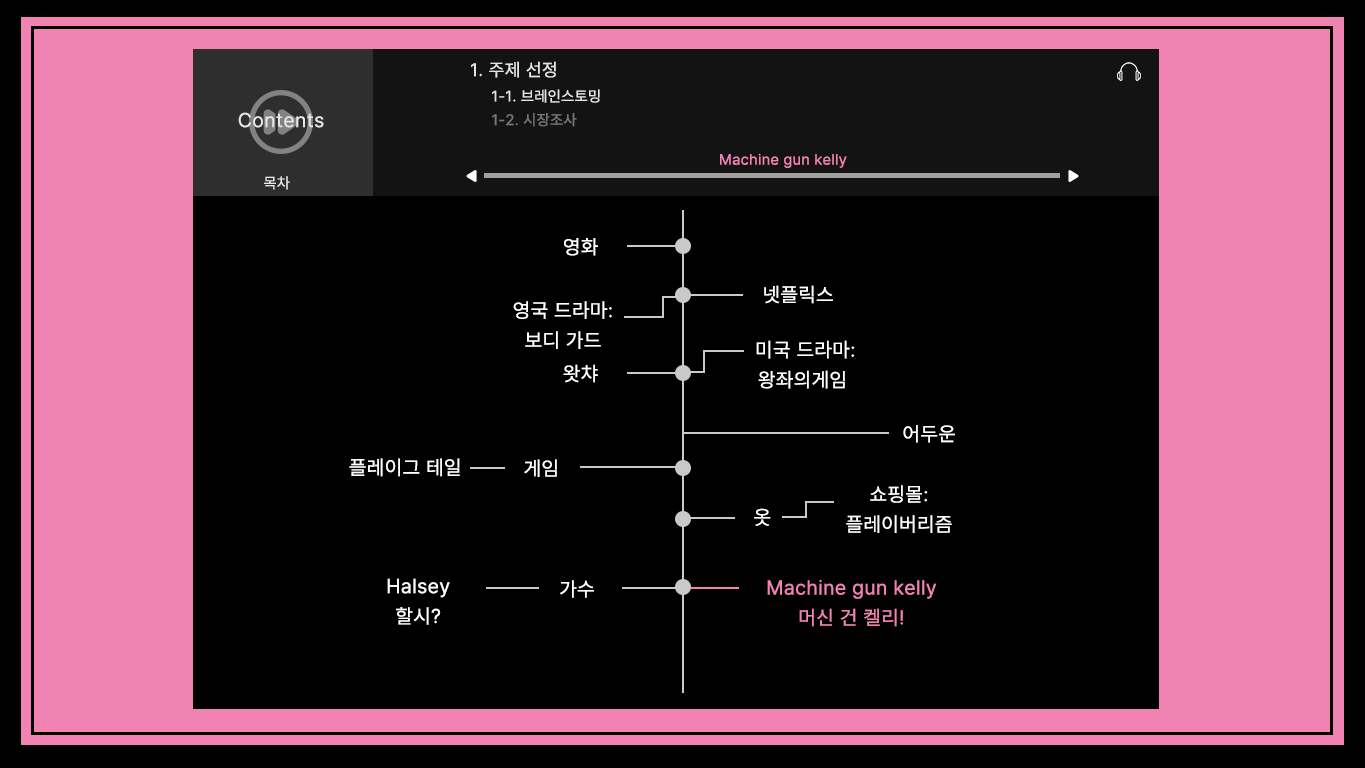
<style>
.page{position:relative;width:1365px;height:768px;background:#000000}
.page>*{position:absolute;margin:0}
.t1{font:18px "Pretendard-Regular";letter-spacing:0.03em;color:#e5e5e5}
.t2{font:15px "Pretendard-Regular";letter-spacing:0.03em;color:#e5e5e5}
.t3{font:20px "Pretendard-Regular";letter-spacing:0.03em;color:#e5e5e5}
.t4{font:15px "Pretendard-Regular";letter-spacing:0.03em;color:#787878}
.t5{font:15px "Pretendard-Regular";letter-spacing:0.03em;color:#f183b2}
.t6{font:20px "Pretendard-Regular";letter-spacing:0.03em;color:#ffffff}
.t7{font:20px/30px "Pretendard-Regular";letter-spacing:0.03em;color:#ffffff}
.t8{font:20px/30px "Pretendard-Regular";letter-spacing:0.03em;color:#f183b2}
</style>
<div class="page">
<p class="t1" style="left:471px;top:61px;width:85px;height:17px">1. 주제 선정</p>
<p class="t2" style="left:492px;top:89px;width:108px;height:14px">1-1. 브레인스토밍</p>
<p class="t3" style="left:238px;top:112px;width:86px;height:16px">Contents</p>
<p class="t4" style="left:492px;top:113px;width:85px;height:14px">1-2. 시장조사</p>
<p class="t5" style="left:720px;top:153px;width:127px;height:15px">Machine gun kelly</p>
<p class="t2" style="left:264px;top:176px;width:26px;height:14px">목차</p>
<p class="t6" style="left:564px;top:238px;width:34px;height:18px">영화</p>
<p class="t6" style="left:764px;top:285px;width:69px;height:19px">넷플릭스</p>
<p class="t7" style="left:513px;top:301px;width:99px;height:48px;text-align:center">영국 드라마:<br>보디 가드</p>
<p class="t7" style="left:756px;top:340px;width:99px;height:49px;text-align:center">미국 드라마:<br>왕좌의게임</p>
<p class="t6" style="left:563px;top:364px;width:35px;height:19px">왓챠</p>
<p class="t6" style="left:903px;top:425px;width:52px;height:18px">어두운</p>
<p class="t6" style="left:349px;top:458px;width:111px;height:19px">플레이그 테일</p>
<p class="t6" style="left:524px;top:459px;width:33px;height:18px">게임</p>
<p class="t7" style="left:846px;top:485px;width:106px;height:48px;text-align:center">쇼핑몰:<br>플레이버리즘</p>
<p class="t6" style="left:754px;top:508px;width:17px;height:18px">옷</p>
<p class="t7" style="left:387px;top:578px;width:63px;height:47px;text-align:center">Halsey<br>할시?</p>
<p class="t6" style="left:560px;top:580px;width:34px;height:18px">가수</p>
<p class="t8" style="left:767px;top:579px;width:170px;height:48px;text-align:center">Machine gun kelly<br>머신 건 켈리!</p>
</div>
